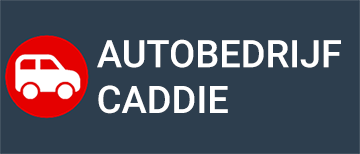
<style>
.page{position:relative;width:360px;height:154px;background:#2d3e4e}
.page>*{position:absolute;margin:0}
.t1{font:38px "Roboto-Medium";color:#ffffff}
</style>
<div class="page">
<p class="t1" style="left:97px;top:39px;width:244px;height:75px">AUTOBEDRIJF<br>CADDIE</p>
</div>
